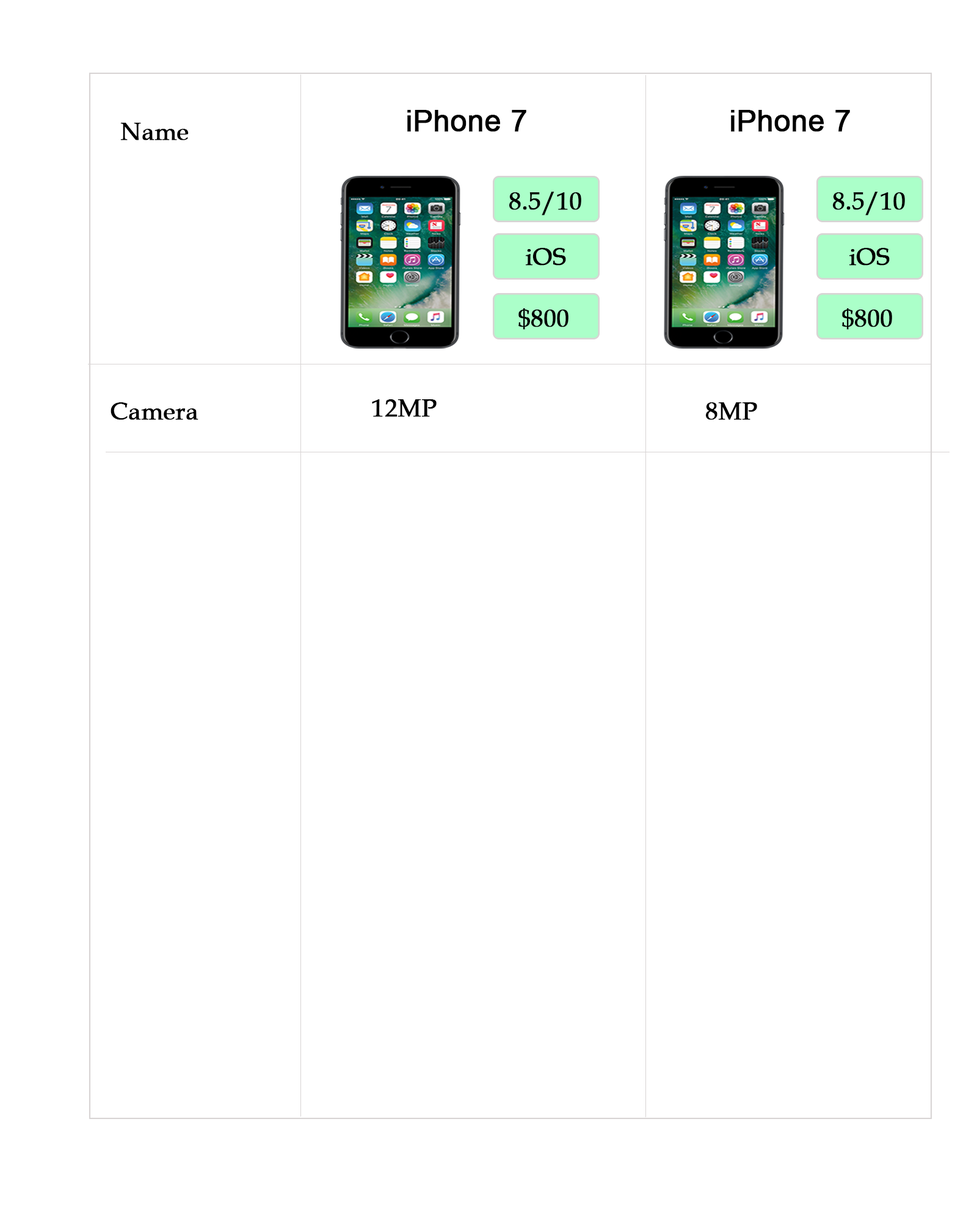
<style>
.page{position:relative;width:977px;height:1221px;background:#ffffff}
.page>*{position:absolute;margin:0}
.t1{font:29.3px "ArialMT";color:#000000;font-weight:bold}
.t2{font:24.4px "BookAntiqua";color:#000000;font-weight:bold}
</style>
<div class="page">
<p class="t1" style="left:407px;top:110px;width:119px;height:22px">iPhone 7</p>
<p class="t1" style="left:731px;top:110px;width:119px;height:22px">iPhone 7</p>
<p class="t2" style="left:120px;top:123px;width:69px;height:17px">Name</p>
<p class="t2" style="left:509px;top:192px;width:72px;height:23px">8.5/10</p>
<p class="t2" style="left:833px;top:192px;width:72px;height:23px">8.5/10</p>
<p class="t2" style="left:526px;top:248px;width:40px;height:18px">iOS</p>
<p class="t2" style="left:849px;top:248px;width:40px;height:18px">iOS</p>
<p class="t2" style="left:518px;top:308px;width:50px;height:22px">$800</p>
<p class="t2" style="left:842px;top:308px;width:50px;height:22px">$800</p>
<p class="t2" style="left:372px;top:399px;width:64px;height:18px">12MP</p>
<p class="t2" style="left:110px;top:402px;width:88px;height:18px">Camera</p>
<p class="t2" style="left:706px;top:402px;width:51px;height:18px">8MP</p>
</div>
